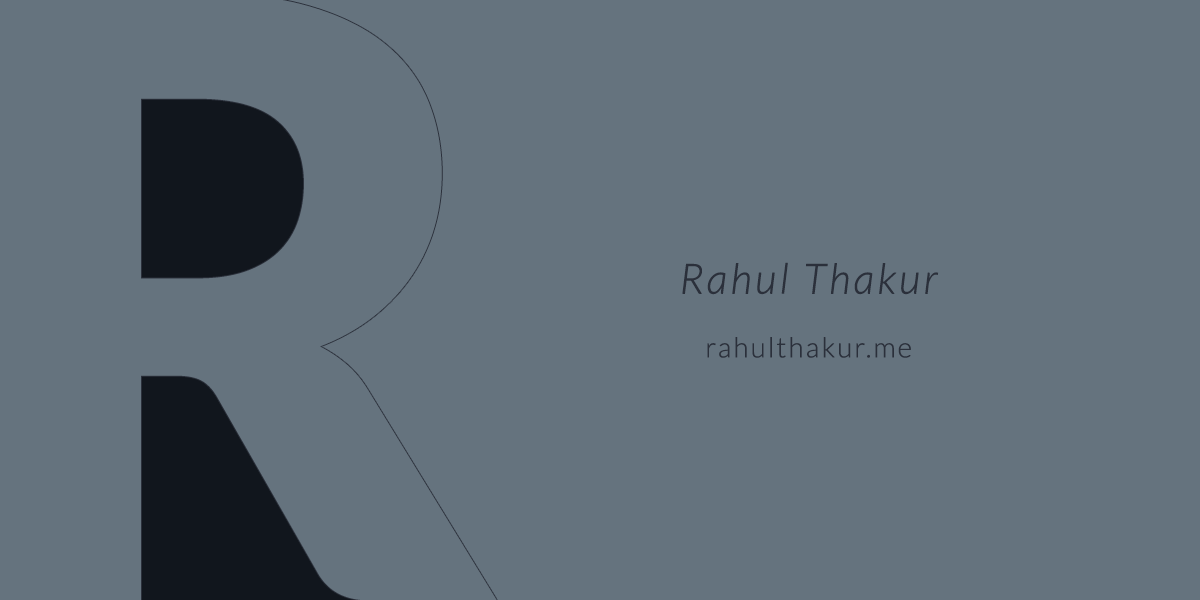
<style>
.page{position:relative;width:1200px;height:600px;background:#65737e}
.page>*{position:absolute;margin:0}
.t1{font:41.7px "Lato-LightItalic";letter-spacing:0.05em;color:#2b303b;font-weight:bold}
.t2{font:27.8px "Lato-Light";letter-spacing:0.05em;color:#2b303b;font-weight:bold}
</style>
<div class="page">
<p class="t1" style="left:682px;top:262px;width:257px;height:33px">Rahul Thakur</p>
<p class="t2" style="left:707px;top:337px;width:204px;height:21px">rahulthakur.me</p>
</div>
